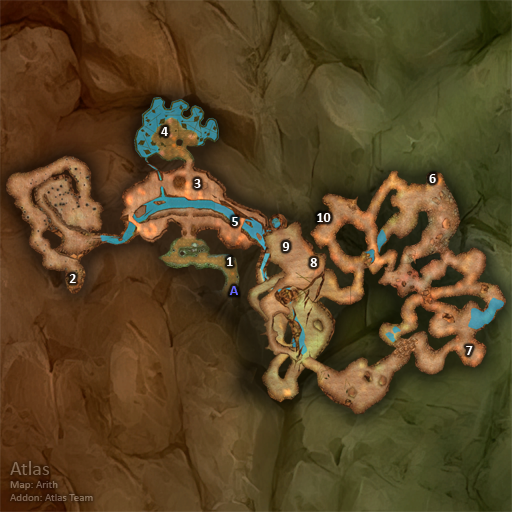
<style>
.page{position:relative;width:512px;height:512px}
.page>*{position:absolute;margin:0}
.t1{font:14px "Calibri-Bold";color:#ffffff}
.t2{font:14px "Calibri-Bold";color:#6666ff}
</style>
<div class="page">
<p class="t1" style="left:161px;top:127px;width:7px;height:9px">4</p>
<p class="t1" style="left:429px;top:174px;width:7px;height:9px">6</p>
<p class="t1" style="left:194px;top:179px;width:7px;height:9px">3</p>
<p class="t1" style="left:232px;top:217px;width:6px;height:9px">5</p>
<p class="t1" style="left:317px;top:213px;width:14px;height:9px">10</p>
<p class="t1" style="left:282px;top:242px;width:8px;height:9px">9</p>
<p class="t1" style="left:227px;top:257px;width:6px;height:9px">1</p>
<p class="t1" style="left:310px;top:258px;width:7px;height:9px">8</p>
<p class="t1" style="left:69px;top:274px;width:7px;height:9px">2</p>
<p class="t2" style="left:229px;top:286px;width:9px;height:9px">A</p>
<p class="t1" style="left:466px;top:346px;width:7px;height:9px">7</p>
</div>
